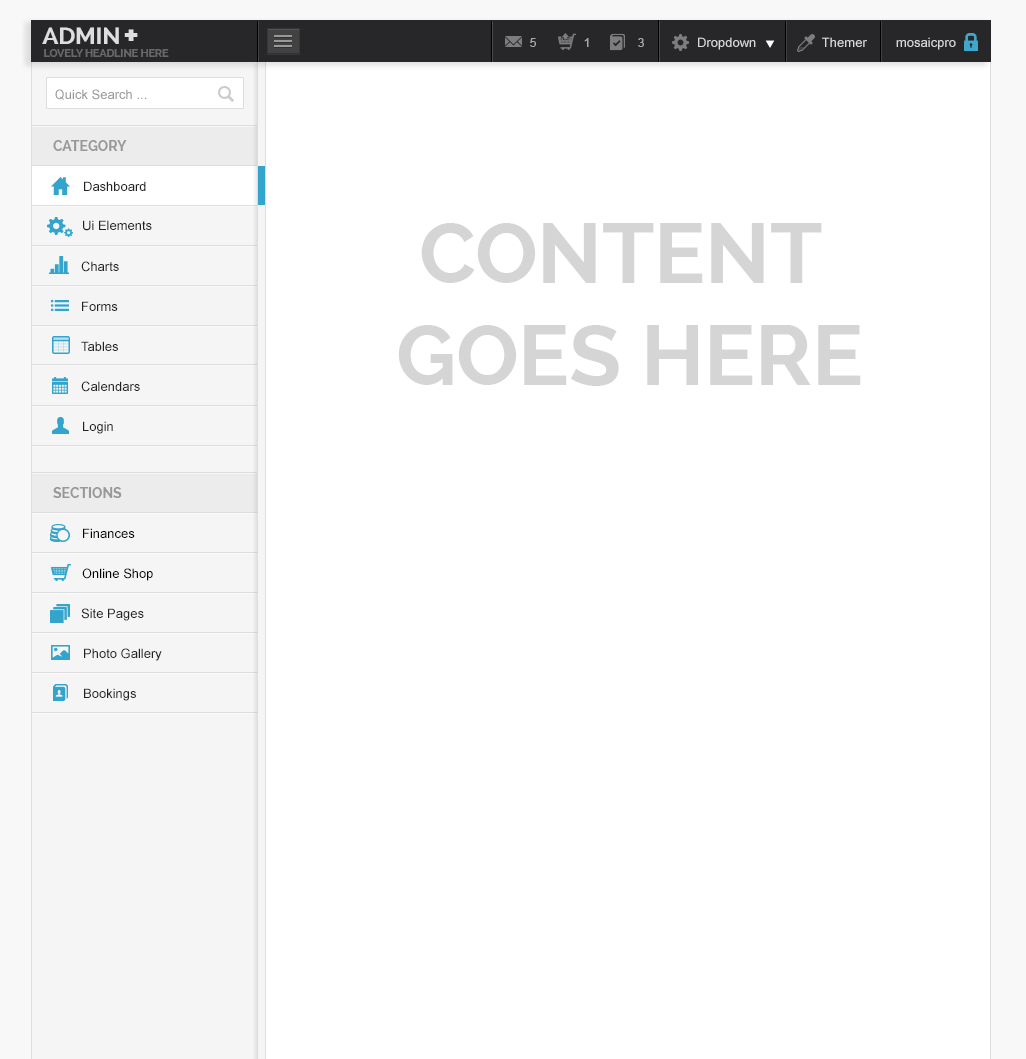
<style>
.page{position:relative;width:1026px;height:1059px;background:#ffffff}
.page>*{position:absolute;margin:0}
.t1{font:23.1px "Raleway-Bold";color:#dedede;text-transform:uppercase}
.t2{font:37.1px "Raleway-Bold";color:#dedede}
.t3{font:12px "ArialMT";color:#a9a9a9}
.t4{font:13px "ArialMT";color:#d9d9d9}
.t5{font:11px "Raleway-Bold";color:#686869;text-transform:uppercase;scale:0.97 1}
.t6{font:13px "ArialMT";color:#999999}
.t7{font:14px "Raleway-Bold";color:#989898;text-transform:uppercase}
.t8{font:13px "ArialMT";color:#222222}
.t9{font:84.5px "Raleway-Bold";color:#d5d5d5}
.t10{font:13px "ArialMT";color:#000000}
</style>
<div class="page">
<p class="t1" style="left:42px;top:27px;width:77px;height:17px">Admin</p>
<p class="t2" style="left:124px;top:29px;width:14px;height:12px">+</p>
<p class="t3" style="left:530px;top:38px;width:6px;height:9px">5</p>
<p class="t3" style="left:584px;top:38px;width:5px;height:9px">1</p>
<p class="t3" style="left:638px;top:38px;width:6px;height:9px">3</p>
<p class="t4" style="left:698px;top:37px;width:58px;height:13px">Dropdown</p>
<p class="t4" style="left:822px;top:37px;width:45px;height:10px">Themer</p>
<p class="t4" style="left:896px;top:37px;width:60px;height:13px">mosaicpro</p>
<p class="t5" style="left:44px;top:49px;width:125px;height:8px">LOVELY HEADLINE HERE</p>
<p class="t6" style="left:55px;top:89px;width:92px;height:11px">Quick Search ...</p>
<p class="t7" style="left:53px;top:140px;width:74px;height:11px">Category</p>
<p class="t8" style="left:84px;top:181px;width:62px;height:10px">Dashboard</p>
<p class="t8" style="left:83px;top:220px;width:69px;height:11px">Ui Elements</p>
<p class="t9" style="left:398px;top:223px;width:463px;height:163px;text-align:center">CONTENT <br>GOES HERE</p>
<p class="t8" style="left:81px;top:261px;width:38px;height:11px">Charts</p>
<p class="t8" style="left:82px;top:301px;width:36px;height:10px">Forms</p>
<p class="t8" style="left:81px;top:341px;width:37px;height:10px">Tables</p>
<p class="t8" style="left:81px;top:381px;width:59px;height:11px">Calendars</p>
<p class="t8" style="left:83px;top:421px;width:30px;height:13px">Login</p>
<p class="t7" style="left:53px;top:487px;width:69px;height:11px">SECTIONS</p>
<p class="t10" style="left:83px;top:528px;width:52px;height:10px">Finances</p>
<p class="t10" style="left:82px;top:568px;width:71px;height:13px">Online Shop</p>
<p class="t8" style="left:81px;top:608px;width:63px;height:13px">Site Pages</p>
<p class="t8" style="left:84px;top:648px;width:78px;height:13px">Photo Gallery</p>
<p class="t8" style="left:84px;top:688px;width:52px;height:13px">Bookings</p>
</div>
